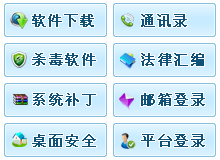
<style>
.page{position:relative;width:220px;height:160px;background:#ffffff}
.page>*{position:absolute;margin:0}
.t1{font:14px/40.5px "SimSun";letter-spacing:0.12em;color:#105178;font-weight:bold}
.t2{font:14px/38.5px "SimSun";letter-spacing:0.08em;color:#105178;font-weight:bold}
.t3{font:14px/38.5px "SimSun";letter-spacing:0.12em;color:#105178;font-weight:bold}
</style>
<div class="page">
<p class="t1" style="left:32px;top:14px;width:64px;height:133px"><span class="t2">软件下载<br></span>杀毒软件<br>系统补丁<br><span class="t3">桌面安全</span></p>
<p class="t1" style="left:141px;top:14px;width:64px;height:133px"><span class="t2">通讯录<br></span>法律汇编<br>邮箱登录<br><span class="t3">平台登录</span></p>
</div>
